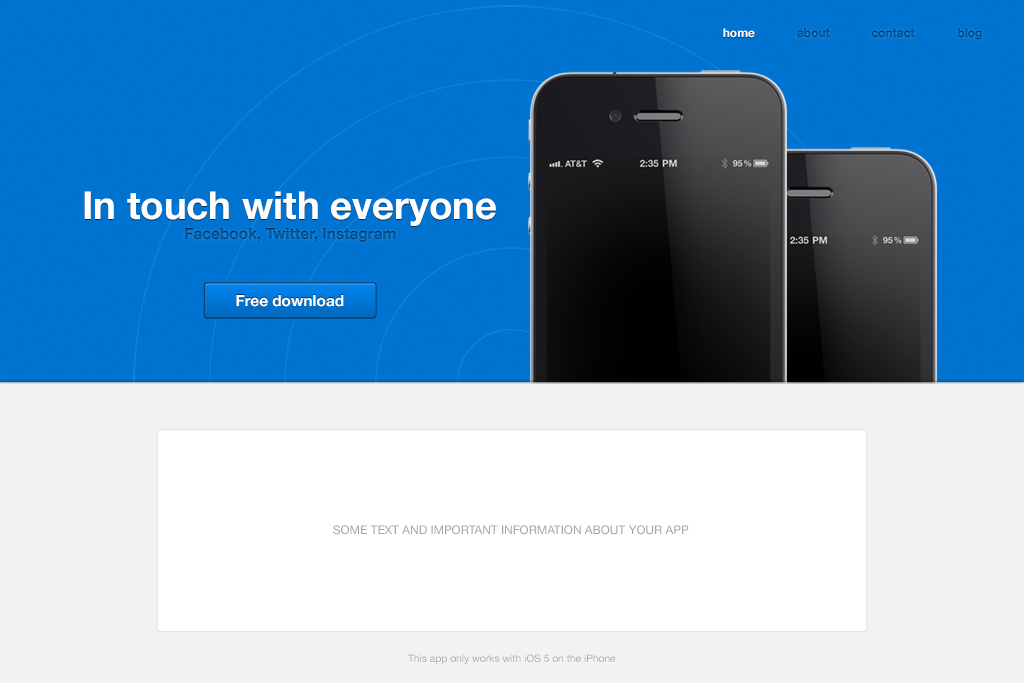
<style>
.page{position:relative;width:1024px;height:683px;background:#f2f2f2}
.page>*{position:absolute;margin:0}
.t1{font:12px "HelveticaNeue-Bold";color:#ffffff}
.t2{font:12px "HelveticaNeue-Bold"}
.t3{font:12px "HelveticaNeue-Bold";color:#015aa3}
.t4{font:38.4px "HelveticaNeue-Bold";color:#ffffff}
.t5{font:15.4px "HelveticaNeue-Bold";color:#015aa3}
.t6{font:15.4px "HelveticaNeue-Bold";color:#ffffff}
.t7{font:12px "HelveticaNeue";color:#a6a6a6}
.t8{font:10.2px "HelveticaNeue";color:#a6a6a6}
</style>
<div class="page">
<p class="t1" style="left:723px;top:28px;width:32px;height:10px">home</p>
<p class="t2" style="left:797px;top:28px;width:33px;height:10px">about</p>
<p class="t2" style="left:871px;top:29px;width:44px;height:9px">contact</p>
<p class="t3" style="left:958px;top:28px;width:24px;height:12px">blog</p>
<p class="t4" style="left:84px;top:191px;width:412px;height:35px">In touch with everyone</p>
<p class="t5" style="left:185px;top:228px;width:211px;height:14px">Facebook, Twitter, Instagram</p>
<p class="t6" style="left:236px;top:295px;width:108px;height:12px">Free download</p>
<p class="t7" style="left:333px;top:525px;width:356px;height:10px">SOME TEXT AND IMPORTANT INFORMATION ABOUT YOUR APP</p>
<p class="t8" style="left:408px;top:654px;width:208px;height:10px">This app only works with iOS 5 on the iPhone</p>
</div>
